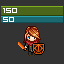
<style>
.page{position:relative;width:64px;height:64px;background:#333333}
.page>*{position:absolute;margin:0}
.t1{font:10px "VisitorTT1BRK";color:#ffffff}
</style>
<div class="page">
<p class="t1" style="left:3px;top:8px;width:14px;height:5px">150</p>
<p class="t1" style="left:3px;top:17px;width:11px;height:5px">50</p>
</div>
